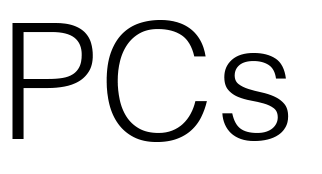
<style>
.page{position:relative;width:322px;height:174px;background:#ffffff}
.page>*{position:absolute;margin:0}
.t1{font:161.3px "Helvetica-Light";color:#000000}
</style>
<div class="page">
<p class="t1" style="left:12px;top:20px;width:277px;height:122px">PCs</p>
</div>
